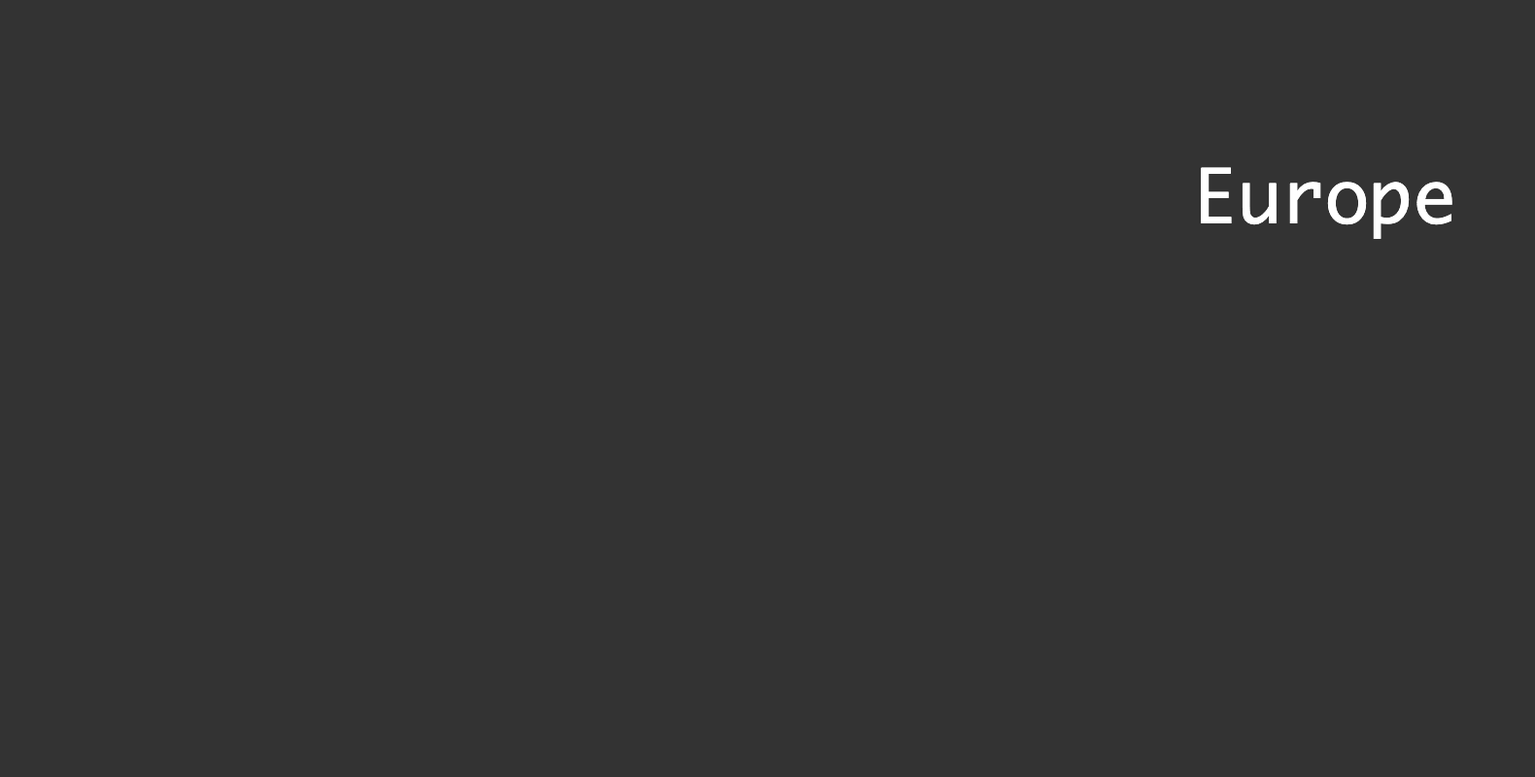
<style>
.page{position:relative;width:1535px;height:777px;background:#333333}
.page>*{position:absolute;margin:0}
.t1{font:72.8px "Ayuthaya";color:#ffffff}
</style>
<div class="page">
<p class="t1" style="left:1200px;top:167px;width:252px;height:72px">Europe</p>
</div>
